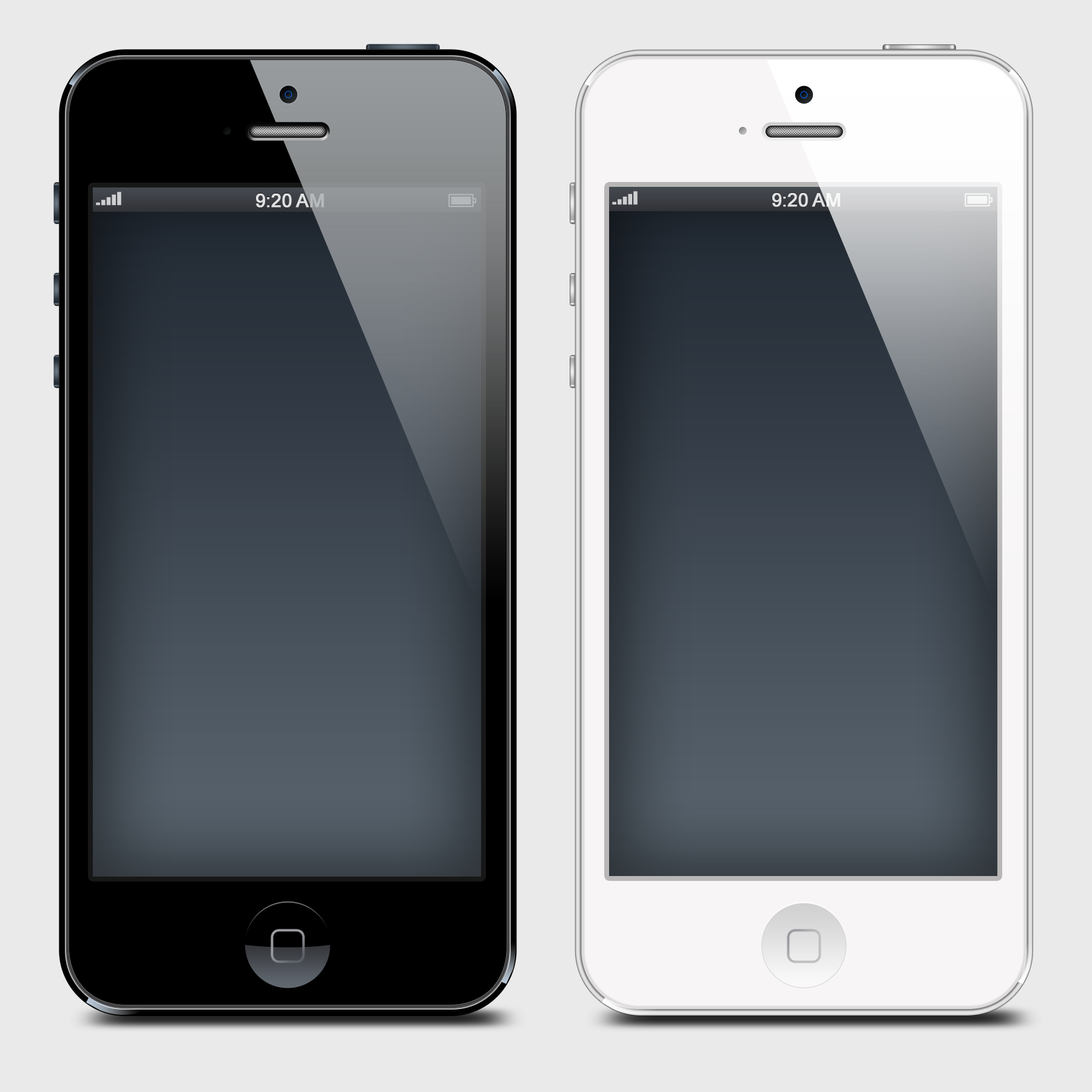
<style>
.page{position:relative;width:1092px;height:1092px;background:#eaeaeb}
.page>*{position:absolute;margin:0}
.t1{font:18.5px "ArialMT";text-transform:uppercase;font-weight:bold}
.t2{font:18.5px "ArialMT";color:#e1e2e2;text-transform:uppercase;font-weight:bold}
</style>
<div class="page">
<p class="t1" style="left:256px;top:194px;width:68px;height:13px">9:20 AM</p>
<p class="t2" style="left:772px;top:193px;width:68px;height:14px">9:20 AM</p>
</div>
